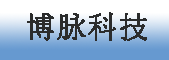
<style>
.page{position:relative;width:169px;height:60px;background:#ffffff}
.page>*{position:absolute;margin:0}
.t1{font:30px "SimSun";color:#2b2c2c;font-weight:bold}
</style>
<div class="page">
<p class="t1" style="left:27px;top:12px;width:120px;height:29px">博脉科技</p>
</div>
